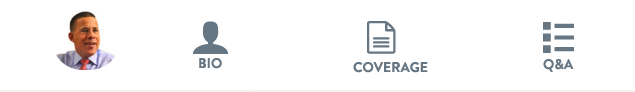
<style>
.page{position:relative;width:635px;height:92px;background:#ffffff}
.page>*{position:absolute;margin:0}
.t1{font:14px "BrandonGrotesque-Bold";color:#667682}
</style>
<div class="page">
<p class="t1" style="left:199px;top:58px;width:23px;height:11px">BIO</p>
<p class="t1" style="left:353px;top:62px;width:75px;height:11px">COVERAGE</p>
<p class="t1" style="left:543px;top:59px;width:31px;height:13px">Q&amp;A</p>
</div>
